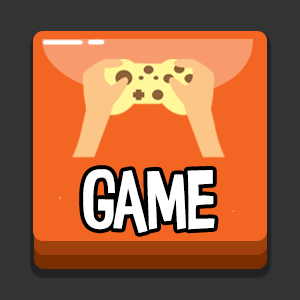
<style>
.page{position:relative;width:300px;height:300px;background:#333333}
.page>*{position:absolute;margin:0}
.t1{font:85.1px "InsideOut";color:#ffffff;scale:0.82 1}
</style>
<div class="page">
<p class="t1" style="left:83px;top:169px;width:132px;height:64px">game</p>
</div>
